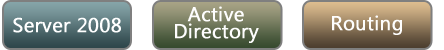
<style>
.page{position:relative;width:444px;height:50px}
.page>*{position:absolute;margin:0}
.t1{font:20px/17px "MicrosoftTaiLe";color:#fefefe;font-weight:bold}
.t2{font:20px "MicrosoftTaiLe";color:#ffffff;font-weight:bold}
.t3{font:20px "MicrosoftTaiLe";color:#fefefe;font-weight:bold}
</style>
<div class="page">
<p class="t1" style="left:175px;top:6px;width:84px;height:37px;text-align:center">Active<br>Directory</p>
<p class="t2" style="left:13px;top:17px;width:108px;height:16px">Server 2008</p>
<p class="t3" style="left:332px;top:15px;width:70px;height:20px">Routing</p>
</div>
